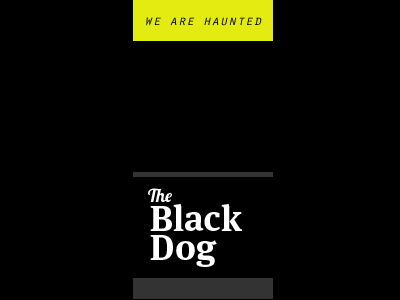
<style>
.page{position:relative;width:400px;height:300px;background:#000000}
.page>*{position:absolute;margin:0}
.t1{font:14px "OratorStd-Slanted";color:#000000}
.t2{font:18px "Lobster1.4";color:#ffffff}
.t3{font:36px "MetaSerifOT-Bold";color:#ffffff}
</style>
<div class="page">
<p class="t1" style="left:146px;top:17px;width:116px;height:9px">we are haunted</p>
<p class="t2" style="left:148px;top:188px;width:24px;height:14px">The</p>
<p class="t3" style="left:150px;top:204px;width:92px;height:27px">Black</p>
<p class="t3" style="left:150px;top:235px;width:67px;height:32px">Dog</p>
</div>
